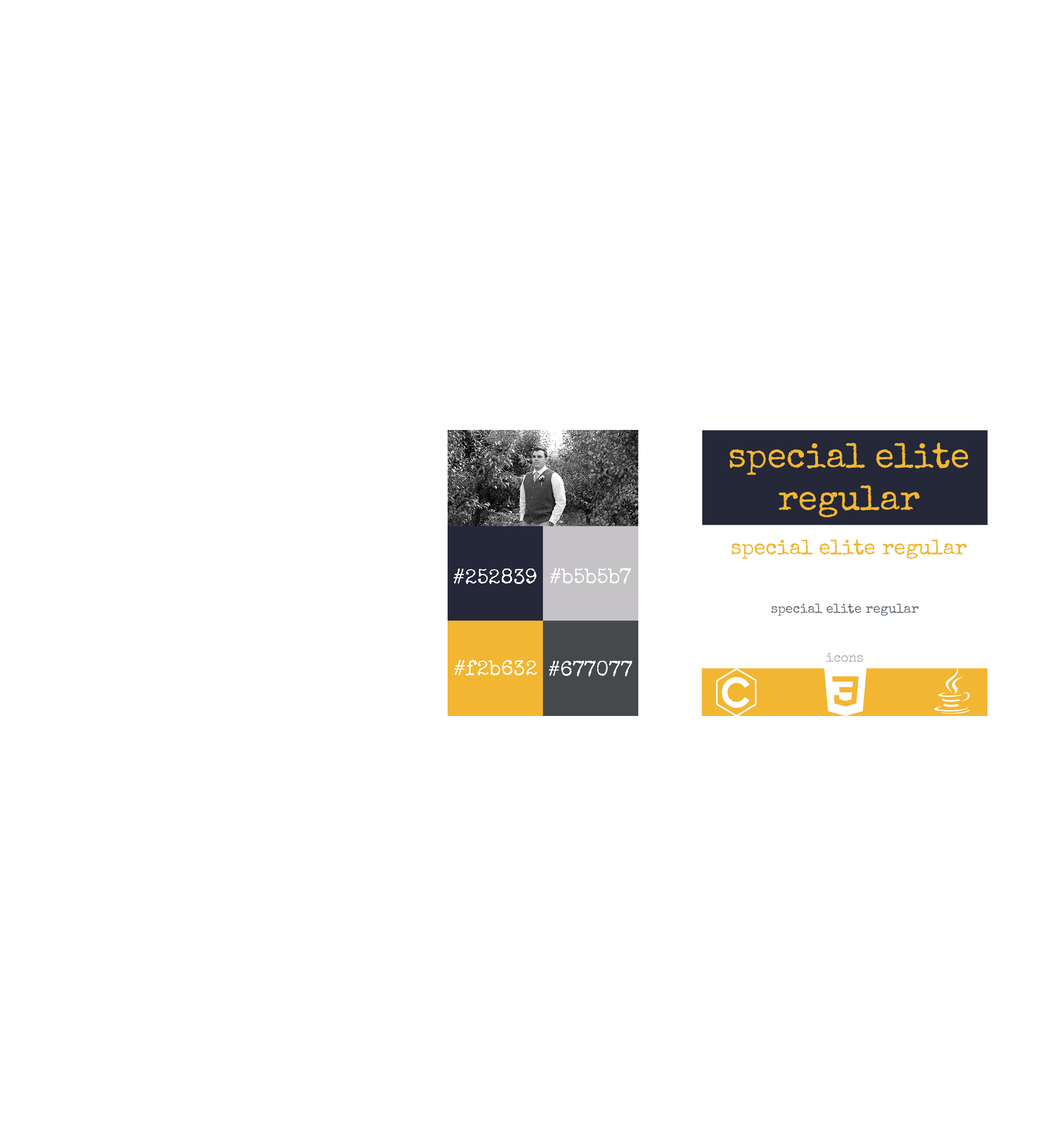
<style>
.page{position:relative;width:1055px;height:1130px;background:#ffffff}
.page>*{position:absolute;margin:0}
.t1{font:35.3px "SpecialElite-Regular";color:#f2b632}
.t2{font:21.2px "SpecialElite-Regular";color:#f2b632}
.t3{font:21.2px "SpecialElite-Regular";color:#fffefe}
.t4{font:13.2px "SpecialElite-Regular";color:#677077}
.t5{font:13.2px "SpecialElite-Regular";color:#b5b5b7}
</style>
<div class="page">
<p class="t1" style="left:729px;top:442px;width:239px;height:75px;text-align:center">special elite regular</p>
<p class="t2" style="left:732px;top:539px;width:235px;height:20px">special elite regular</p>
<p class="t3" style="left:453px;top:569px;width:83px;height:15px">#252839</p>
<p class="t3" style="left:550px;top:568px;width:81px;height:16px">#b5b5b7</p>
<p class="t4" style="left:772px;top:603px;width:147px;height:13px">special elite regular</p>
<p class="t5" style="left:826px;top:652px;width:38px;height:11px">icons</p>
<p class="t3" style="left:454px;top:660px;width:83px;height:15px">#f2b632</p>
<p class="t3" style="left:549px;top:661px;width:83px;height:16px">#677077</p>
</div>
